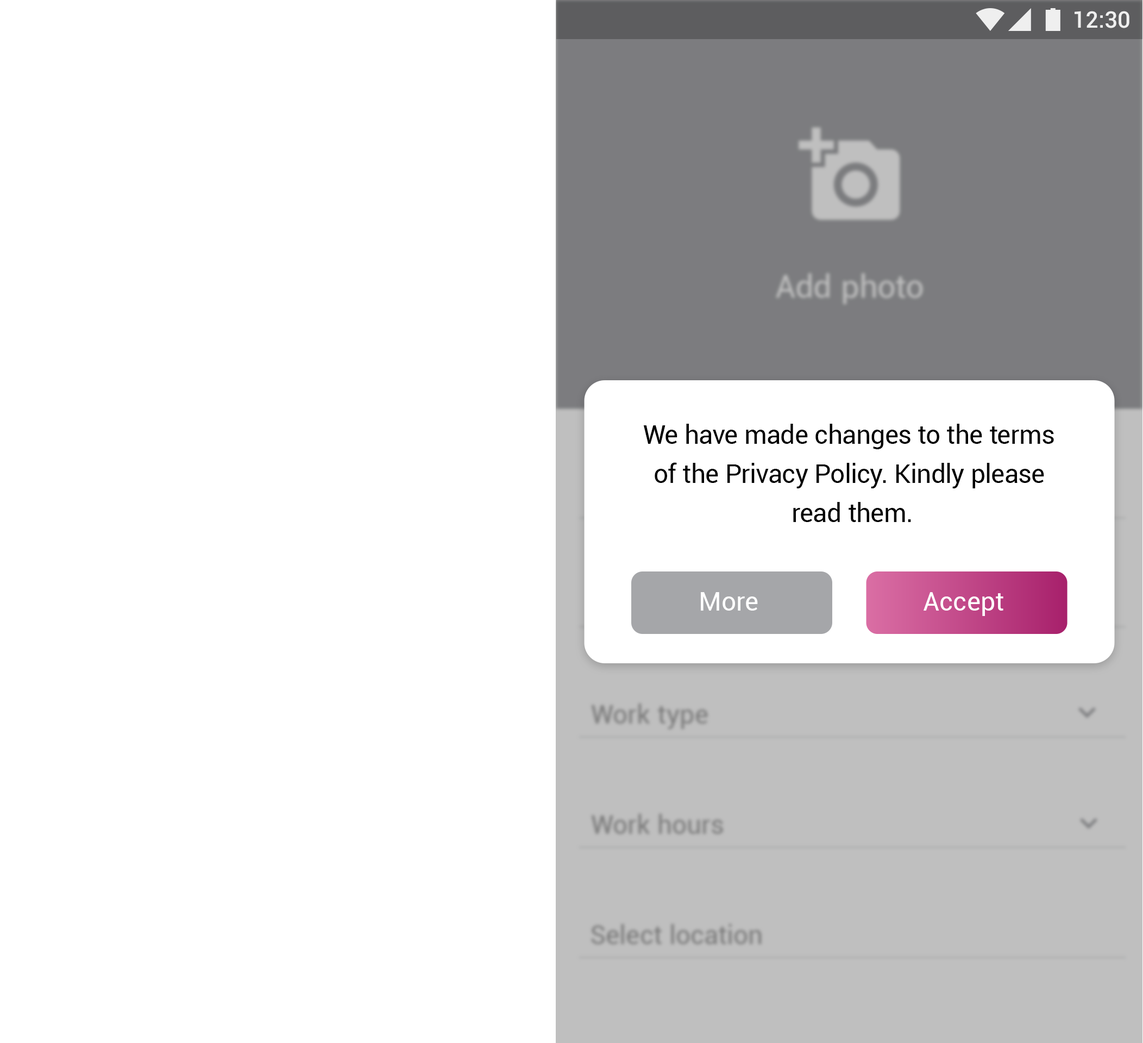
<style>
.page{position:relative;width:1143px;height:1043px;background:#ffffff}
.page>*{position:absolute;margin:0}
.t1{font:22.8px "Roboto-Medium";color:#ffffff}
.t2{font:26.1px/39.1px "Roboto-Regular";letter-spacing:-0.005em;color:#000000}
.t3{font:26.1px "Roboto-Regular";color:#ffffff}
</style>
<div class="page">
<p class="t1" style="left:1075px;top:11px;width:55px;height:17px">12:30</p>
<p class="t2" style="left:643px;top:424px;width:411px;height:98px;text-align:center">We have made changes to the terms <br>of the Privacy Policy. Kindly please <br>read them.</p>
<p class="t3" style="left:701px;top:592px;width:57px;height:19px">More</p>
<p class="t3" style="left:924px;top:592px;width:79px;height:24px">Accept</p>
</div>
